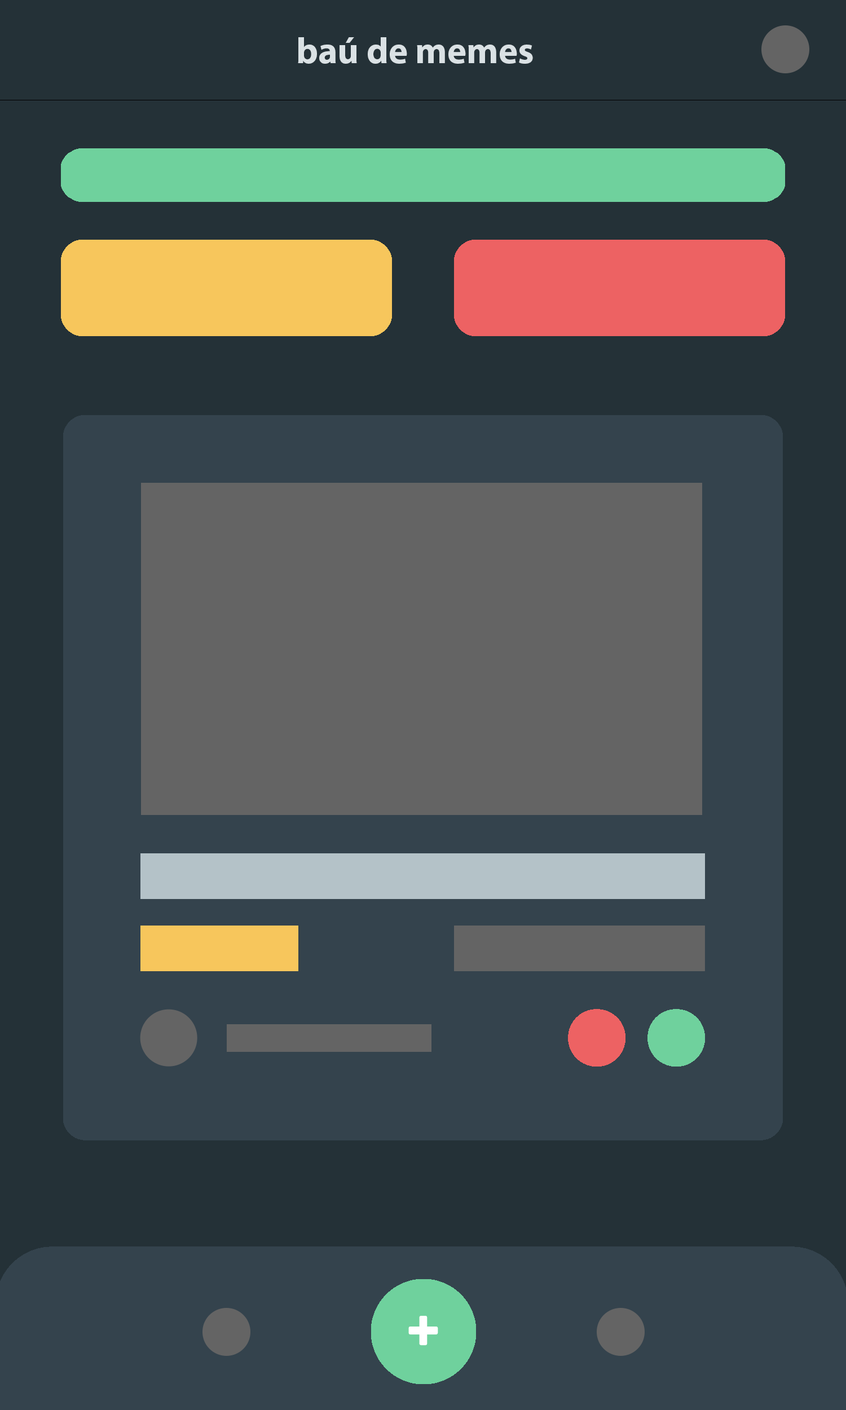
<style>
.page{position:relative;width:846px;height:1410px;background:#243137}
.page>*{position:absolute;margin:0}
.t1{font:36.9px "MyriadPro-Bold";color:#dae1e4}
.t2{font:79.1px "Cocogoose-Light";color:#ffffff}
</style>
<div class="page">
<p class="t1" style="left:298px;top:37px;width:235px;height:27px">baú de memes</p>
<p class="t2" style="left:408px;top:1316px;width:30px;height:29px">+</p>
</div>
